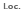
<style>
.page{position:relative;width:24px;height:12px;background:#ffffff}
.page>*{position:absolute;margin:0}
.t1{font:9px "AmiraParadiso";letter-spacing:0.05em;color:#646464}
</style>
<div class="page">
<p class="t1" style="left:3px;top:3px;width:18px;height:6px">Loc.</p>
</div>
